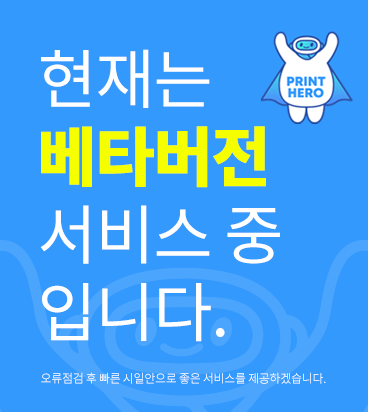
<style>
.page{position:relative;width:368px;height:412px;background:#3399fd}
.page>*{position:absolute;margin:0}
.t1{font:64.8px "NotoSansCJKkr-Regular";letter-spacing:-0.025em;color:#ffffff}
.t2{font:64.8px "NotoSansCJKkr-Black";letter-spacing:-0.025em;color:#f6ff00}
.t3{font:12px "NotoSansCJKkr-DemiLight";letter-spacing:-0.025em;color:#ffffff}
</style>
<div class="page">
<p class="t1" style="left:40px;top:49px;width:240px;height:293px">현재는 <br><span class="t2">베타버전<br></span>서비스 중<br>입니다.</p>
<p class="t3" style="left:41px;top:372px;width:285px;height:12px">오류점검 후 빠른 시일안으로 좋은 서비스를 제공하겠습니다.</p>
</div>
